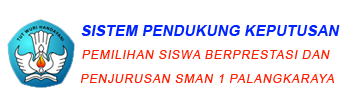
<style>
.page{position:relative;width:346px;height:104px;background:#ffffff}
.page>*{position:absolute;margin:0}
.t1{font:15px "Arial-BoldMT";letter-spacing:0.01em;color:#0024ff;font-style:italic}
.t2{font:12px "ArialMT";letter-spacing:0.05em;color:#ff1e00;font-style:italic;scale:1.03 1}
</style>
<div class="page">
<p class="t1" style="left:81px;top:25px;width:259px;height:11px">SISTEM PENDUKUNG KEPUTUSAN</p>
<p class="t2" style="left:82px;top:50px;width:248px;height:9px">PEMILIHAN SISWA BERPRESTASI DAN</p>
<p class="t2" style="left:80px;top:74px;width:254px;height:9px">PENJURUSAN SMAN 1 PALANGKARAYA</p>
</div>
